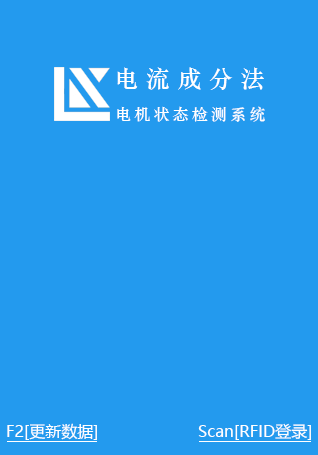
<style>
.page{position:relative;width:318px;height:455px;background:#239aee}
.page>*{position:absolute;margin:0}
.t1{font:24px "STZhongsong";letter-spacing:0.32em;color:#ffffff}
.t2{font:16px "STZhongsong";letter-spacing:0.2em;color:#ffffff}
.t3{font:16px "MicrosoftYaHeiUI";color:#ffffff}
</style>
<div class="page">
<p class="t1" style="left:117px;top:67px;width:147px;height:23px">电流成分法</p>
<p class="t2" style="left:117px;top:106px;width:148px;height:16px">电机状态检测系统</p>
<p class="t3" style="left:7px;top:423px;width:90px;height:17px">F2[更新数据]</p>
<p class="t3" style="left:198px;top:423px;width:113px;height:17px">Scan[RFID登录]</p>
</div>
